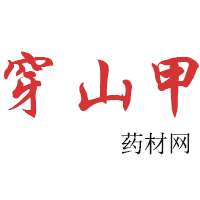
<style>
.page{position:relative;width:200px;height:200px;background:#ffffff}
.page>*{position:absolute;margin:0}
.t1{font:72px "STXingkai";color:#d43434}
.t2{font:24px "SimSun";color:#151414}
</style>
<div class="page">
<p class="t1" style="left:4px;top:51px;width:195px;height:67px">穿山甲</p>
<p class="t2" style="left:121px;top:132px;width:69px;height:23px">药材网</p>
</div>
